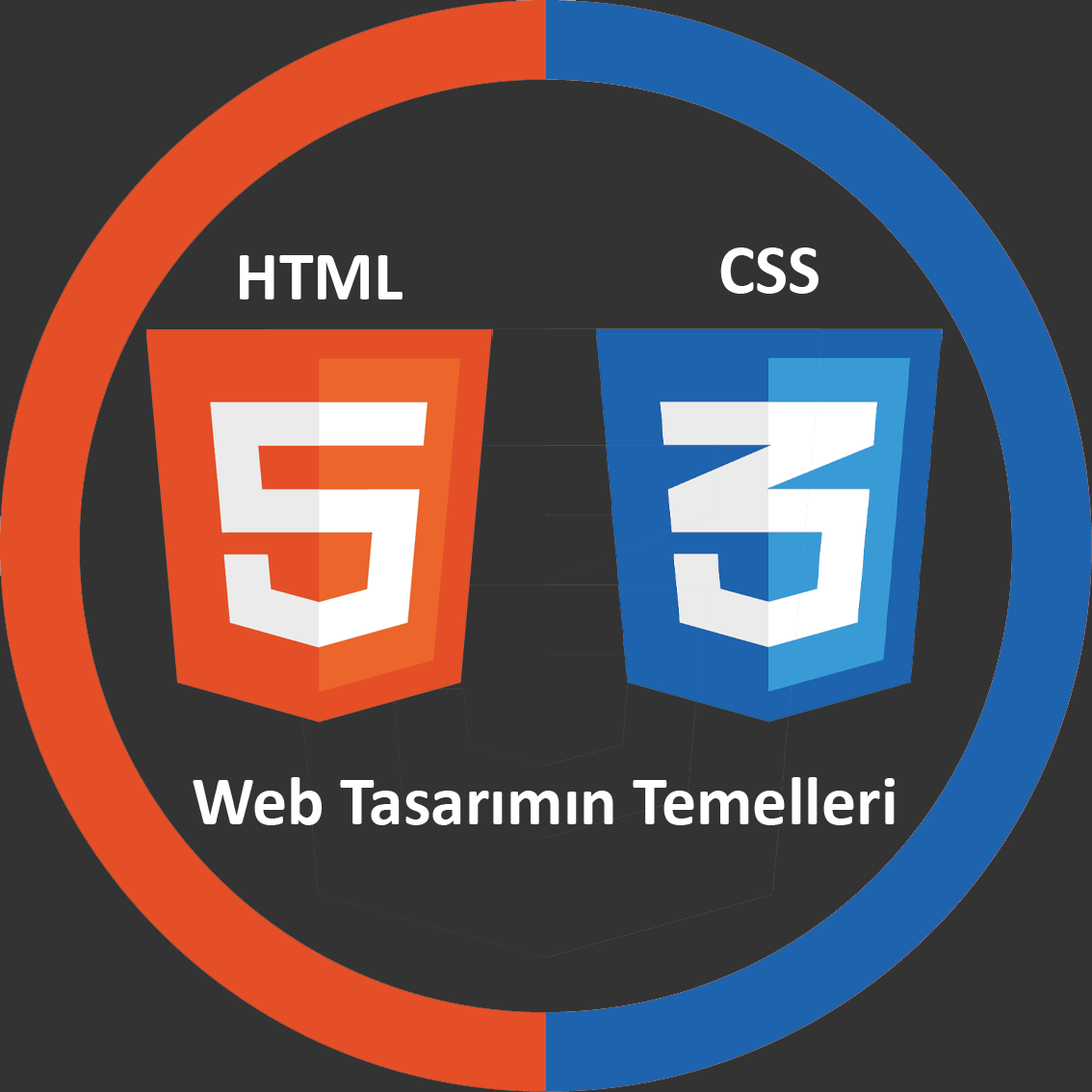
<style>
.page{position:relative;width:1092px;height:1092px;background:#333333}
.page>*{position:absolute;margin:0}
.t1{font:69.3px "Calibri-Bold";color:#ffffff}
</style>
<div class="page">
<p class="t1" style="left:240px;top:255px;width:163px;height:44px">HTML</p>
<p class="t1" style="left:720px;top:247px;width:99px;height:47px">CSS</p>
<p class="t1" style="left:193px;top:777px;width:702px;height:48px">Web Tasarımın Temelleri</p>
</div>
